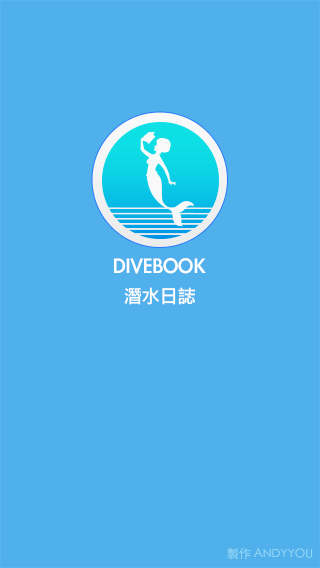
<style>
.page{position:relative;width:320px;height:568px;background:#50b0ec}
.page>*{position:absolute;margin:0}
.t1{font:24px "LiGothicMed";color:#ffffff}
.t2{font:18px "LiGothicMed";color:#ffffff}
.t3{font:12px "STHeitiTC-Light";color:#8fd4f5}
</style>
<div class="page">
<p class="t1" style="left:114px;top:258px;width:92px;height:16px">DIVEBOOK</p>
<p class="t2" style="left:124px;top:287px;width:72px;height:18px">潛水日誌</p>
<p class="t3" style="left:227px;top:548px;width:86px;height:12px">製作 ANDYYOU</p>
</div>
